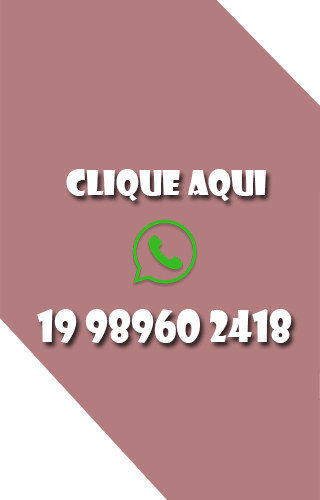
<style>
.page{position:relative;width:320px;height:500px;background:#b37d7f}
.page>*{position:absolute;margin:0}
.t1{font:33.3px "ShowcardGothic-Reg";color:#ffffff}
.t2{font:41.7px "ShowcardGothic-Reg";color:#ffffff}
</style>
<div class="page">
<p class="t1" style="left:66px;top:169px;width:200px;height:32px">clique aqui</p>
<p class="t2" style="left:37px;top:309px;width:255px;height:34px">19 98960 2418</p>
</div>
